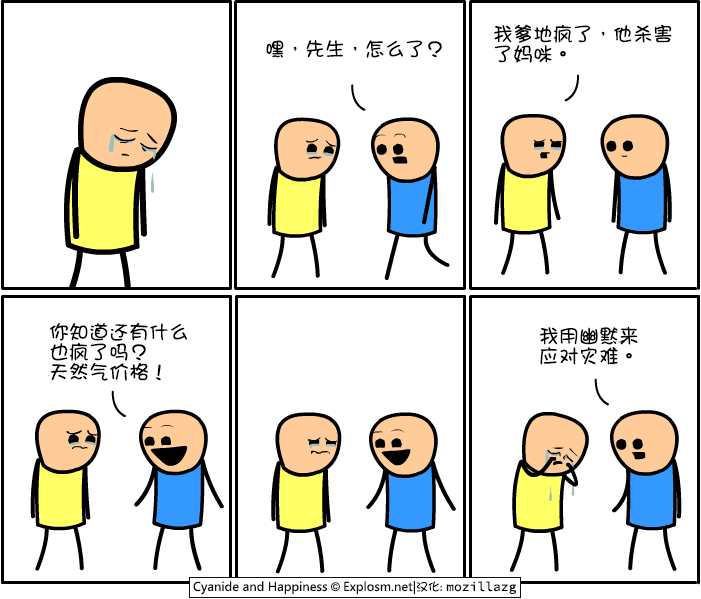
<style>
.page{position:relative;width:701px;height:599px;background:#ffffff}
.page>*{position:absolute;margin:0}
.t1{font:20px/20px "DFGirl";color:#000000}
.t2{font:20px "DFGirl";color:#000000}
</style>
<div class="page">
<p class="t1" style="left:493px;top:24px;width:179px;height:39px">我爹地疯了，他杀害<br>了妈咪。</p>
<p class="t2" style="left:266px;top:39px;width:176px;height:19px">嘿，先生，怎么了？</p>
<p class="t1" style="left:49px;top:322px;width:138px;height:59px">你知道还有什么<br>也疯了吗？<br>天然气价格！</p>
<p class="t1" style="left:539px;top:326px;width:99px;height:39px">我用幽默来<br>应对灾难。</p>
</div>
